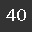
<style>
.page{position:relative;width:32px;height:32px;background:#333333}
.page>*{position:absolute;margin:0}
.t1{font:17.8px "MyriadPro-Regular";color:#ffffff;scale:1.12 1}
</style>
<div class="page">
<p class="t1" style="left:6px;top:9px;width:20px;height:12px">40</p>
</div>
